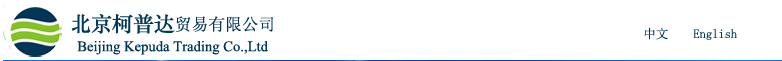
<style>
.page{position:relative;width:782px;height:61px;background:#ffffff}
.page>*{position:absolute;margin:0}
.t1{font:16.7px "SimSun";color:#003756}
.t2{font:20.9px "STZhongsong";color:#003756}
.t3{font:12.5px "SimSun";color:#003756}
.t4{font:14.6px "TimesNewRomanPSMT";color:#003756}
</style>
<div class="page">
<p class="t1" style="left:71px;top:14px;width:202px;height:20px"><span class="t2">北京柯普达</span>贸易有限公司</p>
<p class="t3" style="left:644px;top:27px;width:93px;height:13px">中文    English</p>
<p class="t4" style="left:77px;top:41px;width:191px;height:14px">Beijing Kepuda Trading Co.,Ltd</p>
</div>
